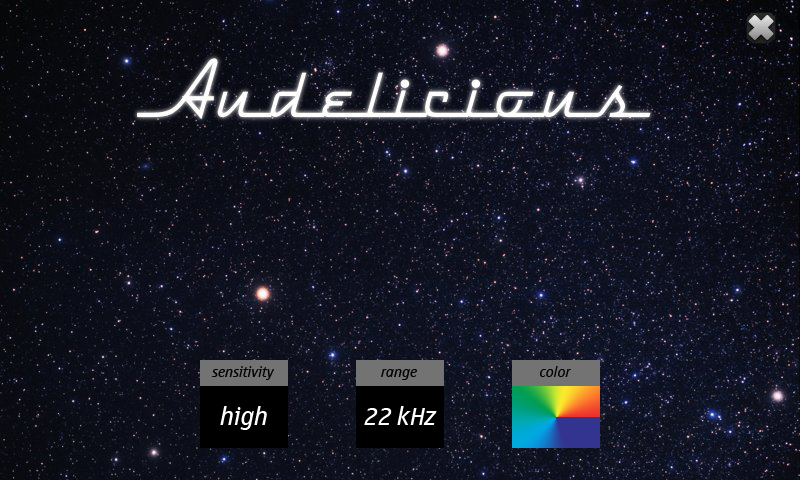
<style>
.page{position:relative;width:800px;height:480px}
.page>*{position:absolute;margin:0}
.t1{font:14px "NokiaSansWide-Italic";color:#000000}
.t2{font:24px "NokiaSansWide-Italic";color:#ffffff}
</style>
<div class="page">
<p class="t1" style="left:212px;top:366px;width:63px;height:14px">sensitivity</p>
<p class="t1" style="left:540px;top:366px;width:31px;height:11px">color</p>
<p class="t1" style="left:381px;top:369px;width:36px;height:11px">range</p>
<p class="t2" style="left:220px;top:406px;width:47px;height:24px">high</p>
<p class="t2" style="left:364px;top:406px;width:73px;height:19px">22 kHz</p>
</div>
